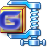
<style>
.page{position:relative;width:47px;height:47px;background:#ffffff}
.page>*{position:absolute;margin:0}
.t1{font:30px "BatmanForeverAlternate"}
</style>
<div class="page">
<p class="t1" style="left:0px;top:11px;width:21px;height:19px">G</p>
</div>
